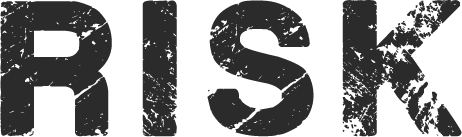
<style>
.page{position:relative;width:462px;height:137px;background:#ffffff}
.page>*{position:absolute;margin:0}
.t1{font:154px "PlaneCrash";letter-spacing:0.1em;color:#2b2b2b}
</style>
<div class="page">
<p class="t1" style="left:0px;top:0px;width:462px;height:137px">risk</p>
</div>
